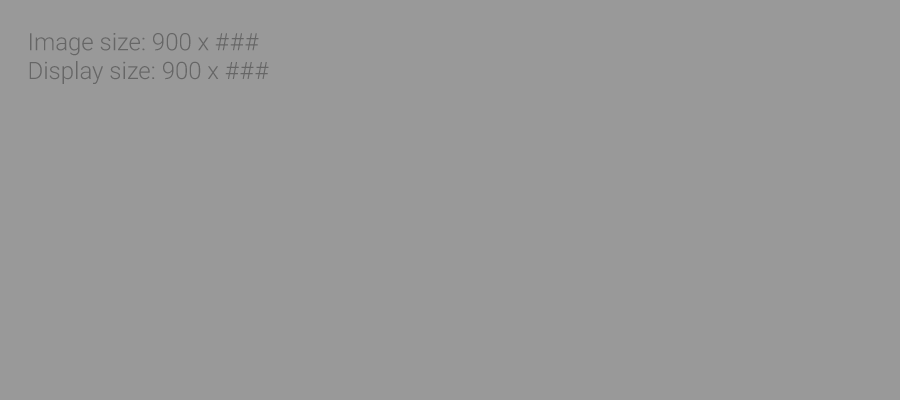
<style>
.page{position:relative;width:900px;height:400px;background:#999999}
.page>*{position:absolute;margin:0}
.t1{font:24px "Roboto-Light";color:#666666}
</style>
<div class="page">
<p class="t1" style="left:29px;top:33px;width:240px;height:51px">Image size: 900 x ###<br>Display size: 900 x ###</p>
</div>
